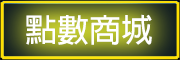
<style>
.page{position:relative;width:180px;height:60px}
.page>*{position:absolute;margin:0}
.t1{font:32px "AdobeFanHeitiStd-Bold";color:#ffffff}
</style>
<div class="page">
<p class="t1" style="left:26px;top:14px;width:126px;height:31px">點數商城</p>
</div>
